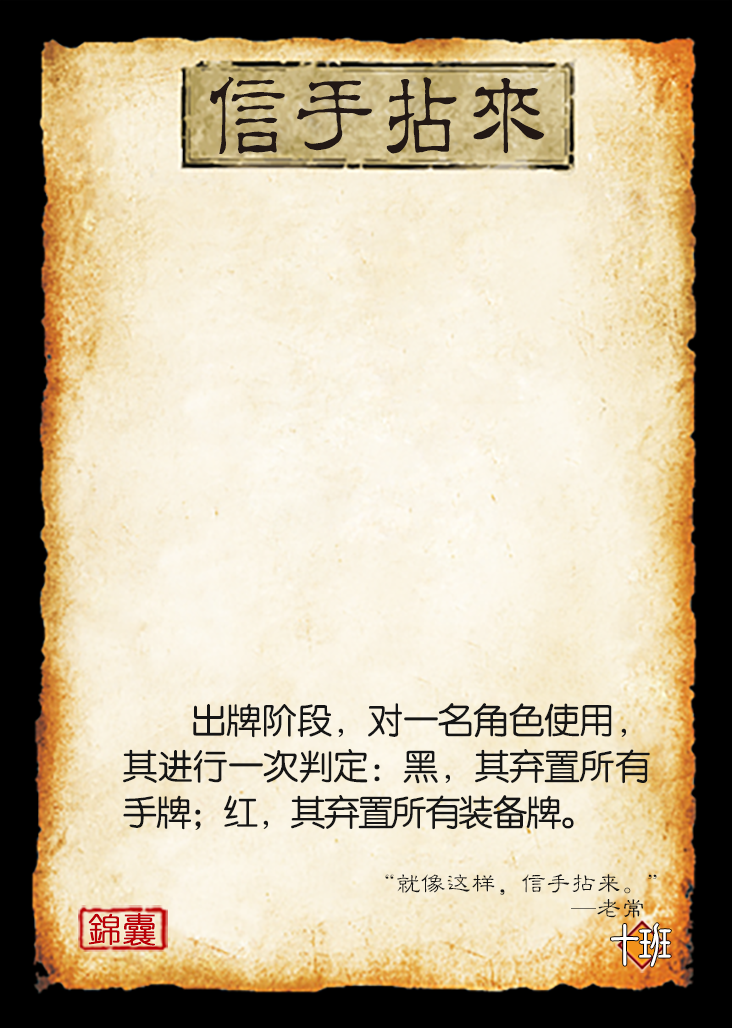
<style>
.page{position:relative;width:732px;height:1028px}
.page>*{position:absolute;margin:0}
.t1{font:91.7px "JMFLS_GBK";color:#221815;scale:0.95 1}
.t2{font:35.4px/45.8px "FZY3JW--GB1-0";letter-spacing:-0.05em;color:#151515}
.t3{font:25px/25px "FZLBJW--GB1-0";color:#151515}
.t4{font:33.3px "YouYuan";color:#ba0007;font-weight:bold}
.t5{font:50px "DFNewChuan-W5-WINP-BF";letter-spacing:-0.4em;color:#ffffff}
</style>
<div class="page">
<p class="t1" style="left:209px;top:76px;width:336px;height:78px">信手拈來</p>
<p class="t2" style="left:123px;top:703px;width:527px;height:127px;text-align:justify">出牌阶段，对一名角色使用，其进行一次判定：黑，其弃置所有手牌；红，其弃置所有装备牌。</p>
<p class="t3" style="left:385px;top:874px;width:272px;height:44px;text-align:right">“就像这样，信手拈来。”<br>                                      —老常</p>
<p class="t4" style="left:88px;top:913px;width:68px;height:33px">錦囊</p>
<p class="t5" style="left:611px;top:923px;width:60px;height:44px">十班</p>
</div>
